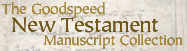
<style>
.page{position:relative;width:187px;height:51px}
.page>*{position:absolute;margin:0}
.t1{font:13.8px "DYLAN";letter-spacing:0.01em;color:#ae8c28}
.t2{font:19.4px "DYLAN";letter-spacing:0.01em;color:#72580c}
.t3{font:13.3px "DYLAN";letter-spacing:0.01em;color:#ae8628}
</style>
<div class="page">
<p class="t1" style="left:1px;top:2px;width:104px;height:16px">The Goodspeed</p>
<p class="t2" style="left:11px;top:17px;width:147px;height:16px">New Testament</p>
<p class="t3" style="left:44px;top:34px;width:139px;height:15px">Manuscript Collection</p>
</div>
